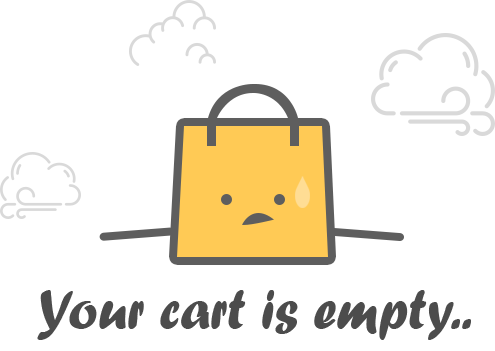
<style>
.page{position:relative;width:495px;height:351px;background:#ffffff}
.page>*{position:absolute;margin:0}
.t1{font:55.8px "ForteMT";color:#4c4c4c;scale:0.93 1}
</style>
<div class="page">
<p class="t1" style="left:37px;top:290px;width:434px;height:50px">Your cart is empty..</p>
</div>
